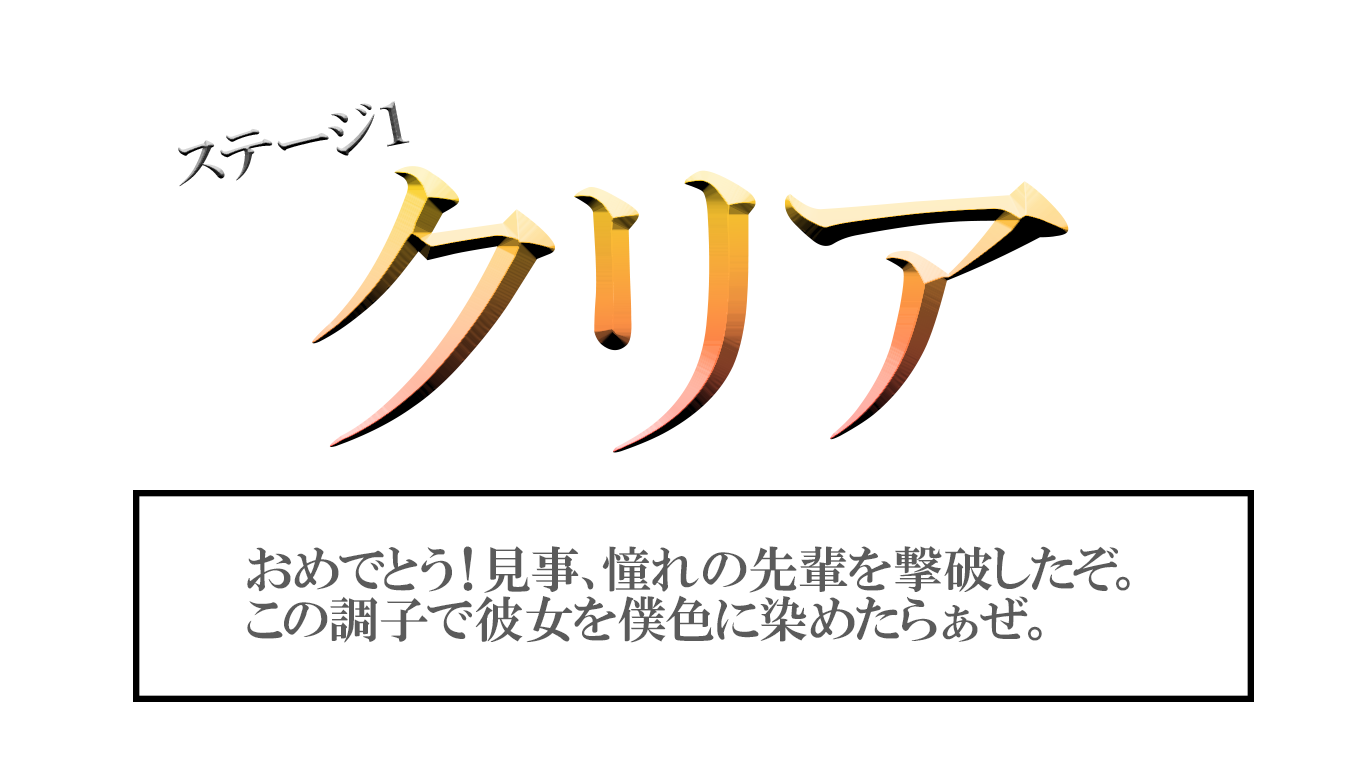
<style>
.page{position:relative;width:1366px;height:768px;background:#ffffff}
.page>*{position:absolute;margin:0}
.t1{font:58.4px "HGPMinchoE"}
.t2{font:326.3px "HGPMinchoE"}
.t3{font:50px/50px "HGPMinchoE";color:#5b5b5b}
</style>
<div class="page">
<p class="t1" style="left:178px;top:101px;width:232px;height:86px;rotate:-11deg">ステージ１</p>
<p class="t2" style="left:312px;top:166px;width:757px;height:287px">クリア</p>
<p class="t3" style="left:247px;top:546px;width:883px;height:97px">おめでとう！見事、憧れの先輩を撃破したぞ。<br>この調子で彼女を僕色に染めたらぁぜ。</p>
</div>
